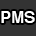
<style>
.page{position:relative;width:36px;height:36px;background:#333333}
.page>*{position:absolute;margin:0}
.t1{font:16px "Helvetica-Bold";color:#ffffff}
</style>
<div class="page">
<p class="t1" style="left:1px;top:11px;width:34px;height:12px">PMS</p>
</div>
